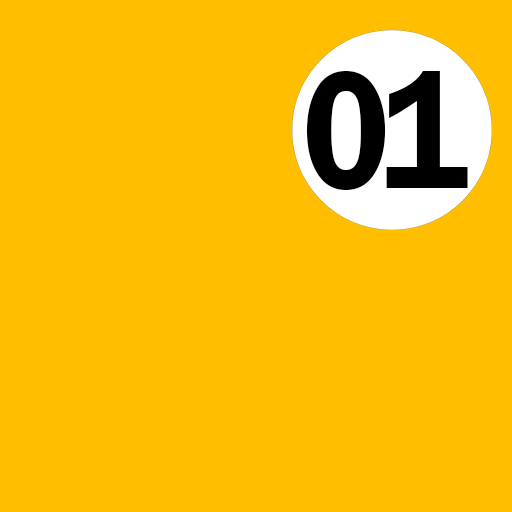
<style>
.page{position:relative;width:512px;height:512px;background:#ffbe00}
.page>*{position:absolute;margin:0}
.t1{font:172.5px "FranklinGothic-Demi";letter-spacing:-0.05em;color:#000000;scale:0.87 1}
</style>
<div class="page">
<p class="t1" style="left:306px;top:71px;width:162px;height:119px">01</p>
</div>
